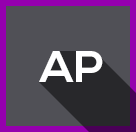
<style>
.page{position:relative;width:136px;height:132px;background:#505056}
.page>*{position:absolute;margin:0}
.t1{font:44px "NexaBold";color:#ffffff}
</style>
<div class="page">
<p class="t1" style="left:39px;top:51px;width:64px;height:31px">AP</p>
</div>
